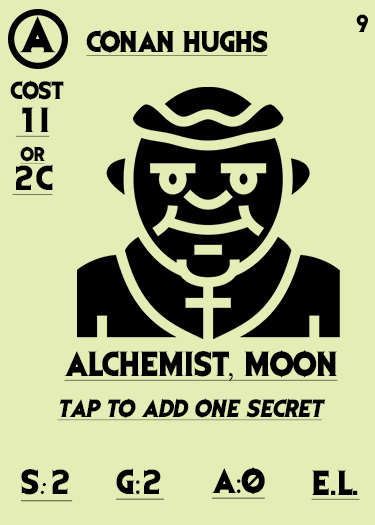
<style>
.page{position:relative;width:375px;height:525px;background:#e3edb5}
.page>*{position:absolute;margin:0}
.t1{font:41.7px "EvilDead";letter-spacing:-0.05em;color:#000000}
.t2{font:20.8px "EvilDead";color:#000000}
.t3{font:25px "EvilDead";letter-spacing:-0.025em;color:#000000;text-decoration:underline}
.t4{font:29.2px/29.2px "EvilDead";color:#000000;text-decoration:underline}
.t5{font:16.7px/29.2px "EvilDead";color:#000000;text-decoration:underline}
.t6{font:29.2px "EvilDead";color:#000000;text-decoration:underline}
.t7{font:29.2px "FelixTitlingMT";color:#000000;text-decoration:underline}
.t8{font:20.8px "EvilDead";color:#000000;font-style:italic;text-decoration:underline}
.t9{font:29.2px "Fadli-Script";color:#000000;text-decoration:underline}
.t10{font:29.2px "MyriadPro-Regular";color:#000000;text-decoration:underline}
</style>
<div class="page">
<p class="t1" style="left:19px;top:16px;width:37px;height:37px">A</p>
<p class="t2" style="left:356px;top:14px;width:12px;height:18px">9</p>
<p class="t3" style="left:86px;top:29px;width:182px;height:27px">CONAN HUGHS</p>
<p class="t2" style="left:10px;top:80px;width:54px;height:20px">COST</p>
<p class="t4" style="left:12px;top:107px;width:41px;height:88px;text-align:center">1I<br><span class="t5">or<br></span>2C</p>
<p class="t6" style="left:64px;top:350px;width:274px;height:31px">ALCHEMIST<span class="t7">,</span> MOON</p>
<p class="t8" style="left:57px;top:398px;width:269px;height:23px">Tap to add one secret</p>
<p class="t6" style="left:21px;top:469px;width:52px;height:33px">S<span class="t9">:</span>2</p>
<p class="t6" style="left:116px;top:468px;width:49px;height:32px">G<span class="t10">:</span>2</p>
<p class="t6" style="left:211px;top:467px;width:54px;height:32px">A<span class="t10">:</span>0</p>
<p class="t6" style="left:311px;top:470px;width:49px;height:30px">E.L.</p>
</div>
